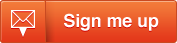
<style>
.page{position:relative;width:177px;height:43px}
.page>*{position:absolute;margin:0}
.t1{font:18px "Helvetica-Bold";letter-spacing:-0.01em;color:#ffffff}
</style>
<div class="page">
<p class="t1" style="left:64px;top:13px;width:95px;height:18px">Sign me up</p>
</div>
